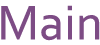
<style>
.page{position:relative;width:100px;height:45px;background:#ffffff}
.page>*{position:absolute;margin:0}
.t1{font:51px "Corbel";color:#7d4c85}
</style>
<div class="page">
<p class="t1" style="left:1px;top:5px;width:99px;height:36px">Main</p>
</div>
